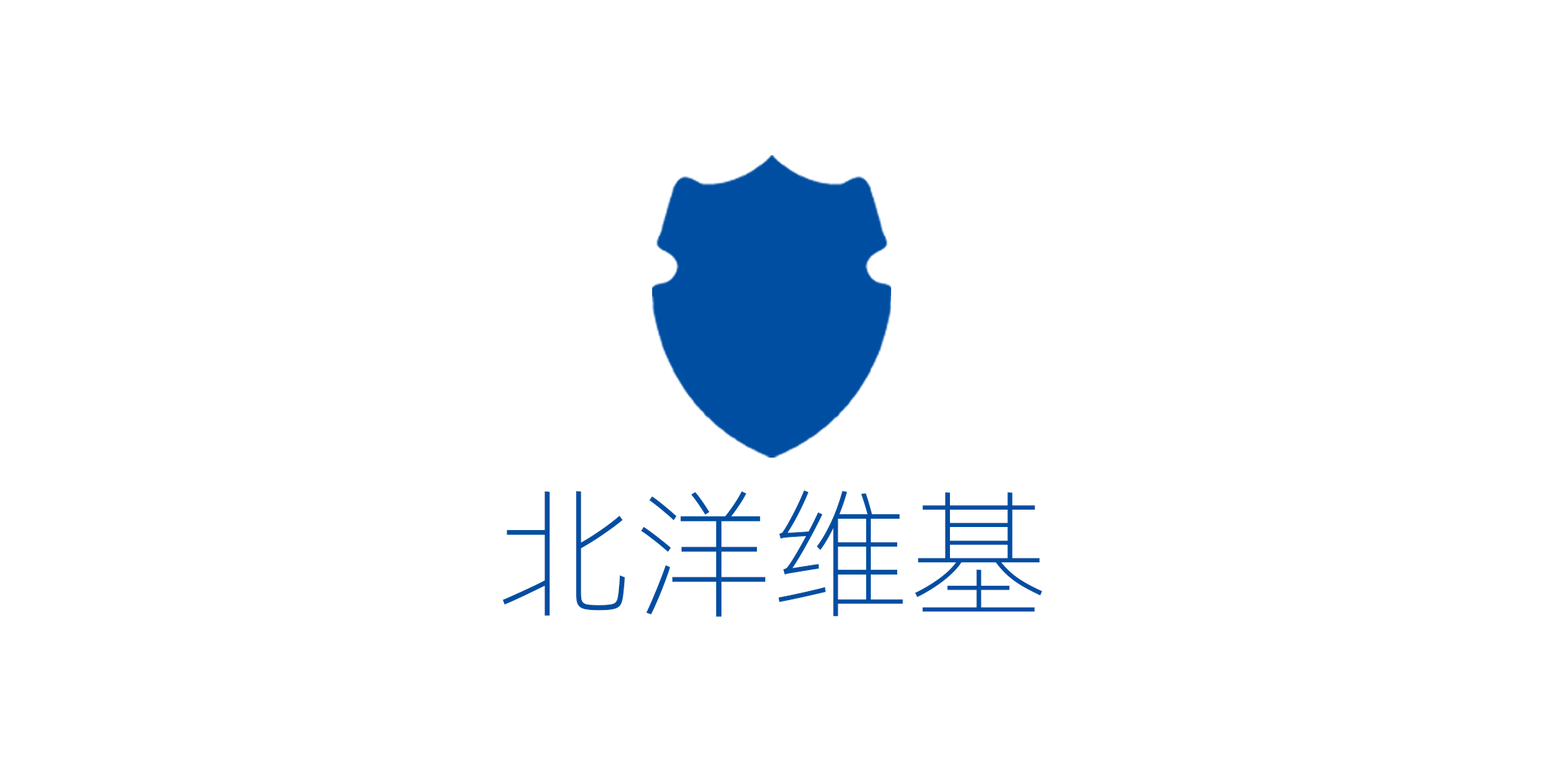
<style>
.page{position:relative;width:1544px;height:772px;background:#ffffff}
.page>*{position:absolute;margin:0}
.t1{font:140.2px "Alibaba-PuHuiTi-L";color:#004ea2}
</style>
<div class="page">
<p class="t1" style="left:502px;top:490px;width:541px;height:127px">北洋维基</p>
</div>
